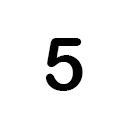
<style>
.page{position:relative;width:128px;height:128px;background:#ffffff}
.page>*{position:absolute;margin:0}
.t1{font:73px "ArialRoundedMTBold";letter-spacing:0.4em;color:#000000}
</style>
<div class="page">
<p class="t1" style="left:45px;top:38px;width:38px;height:53px">5</p>
</div>
